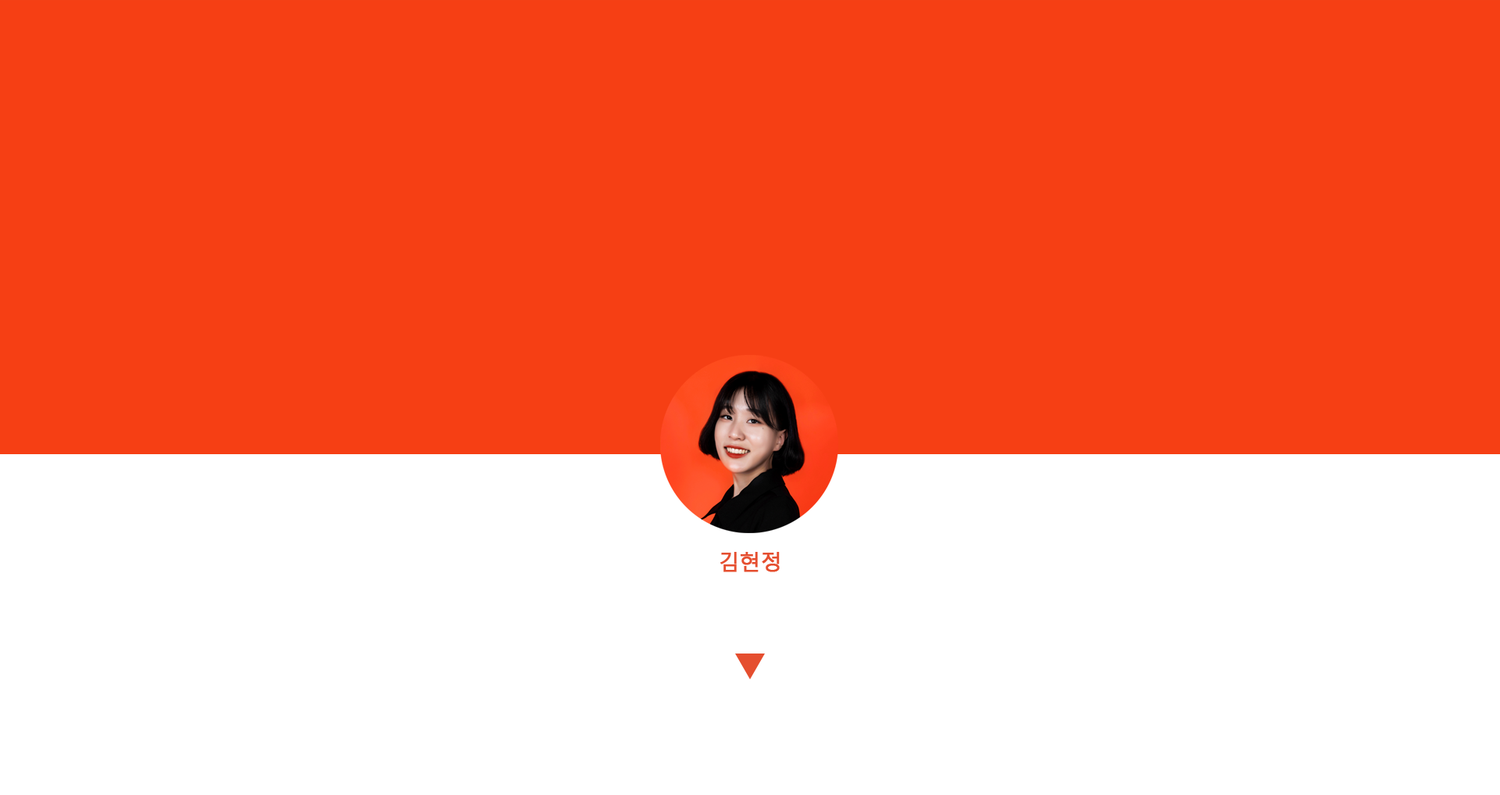
<style>
.page{position:relative;width:1500px;height:795px;background:#f63f14}
.page>*{position:absolute;margin:0}
.t1{font:20.8px "MalgunGothic";color:#e54e2f;font-weight:bold}
</style>
<div class="page">
<p class="t1" style="left:721px;top:552px;width:59px;height:20px">김현정</p>
</div>
